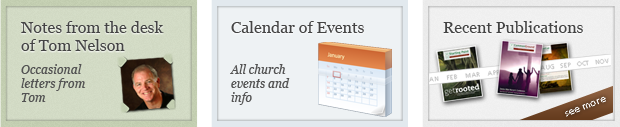
<style>
.page{position:relative;width:620px;height:127px}
.page>*{position:absolute;margin:0}
.t1{font:16px/18px "Georgia";color:#444444}
.t2{font:16px "Georgia";color:#444444}
.t3{font:12px/14px "Georgia-Italic";color:#535353}
</style>
<div class="page">
<p class="t1" style="left:21px;top:21px;width:143px;height:30px">Notes from the desk<br>of Tom Nelson</p>
<p class="t2" style="left:231px;top:21px;width:133px;height:12px">Calendar of Events</p>
<p class="t2" style="left:443px;top:21px;width:140px;height:12px">Recent Publications</p>
<p class="t3" style="left:21px;top:64px;width:65px;height:38px">Occasional letters from Tom</p>
<p class="t3" style="left:230px;top:64px;width:60px;height:41px">All church events and info</p>
</div>
